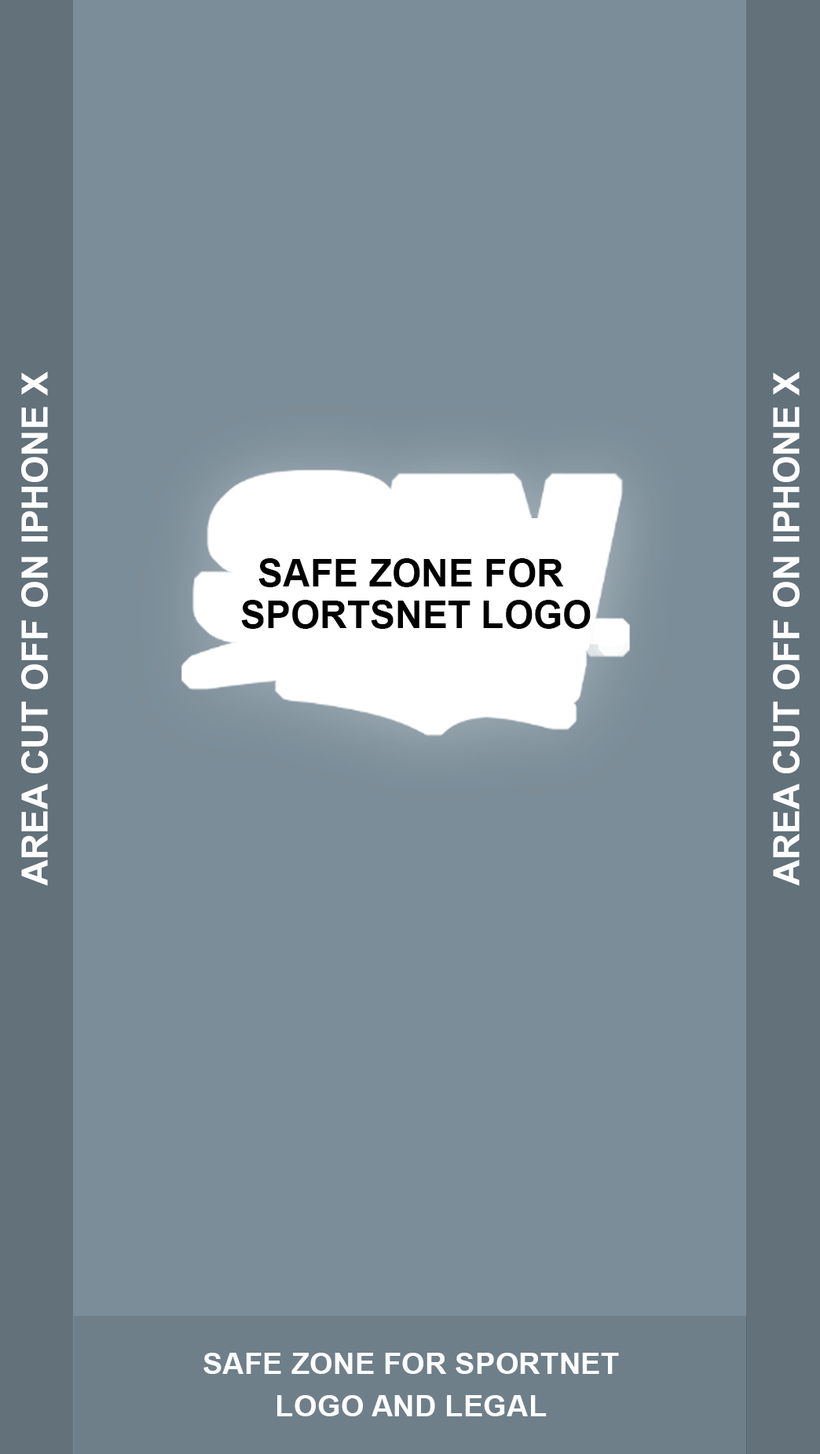
<style>
.page{position:relative;width:820px;height:1454px;background:#7b8d98}
.page>*{position:absolute;margin:0}
.t1{font:36.1px "Arial-BoldMT";color:#ffffff}
.t2{font:37.7px/42.1px "Arial-BoldMT";color:#000000}
.t3{font:30.1px/42.1px "Arial-BoldMT";color:#ffffff}
</style>
<div class="page">
<p class="t1" style="left:21px;top:371px;width:27px;height:515px;rotate:-90deg">AREA CUT OFF ON IPHONE X</p>
<p class="t1" style="left:773px;top:371px;width:26px;height:515px;rotate:-90deg">AREA CUT OFF ON IPHONE X</p>
<p class="t2" style="left:241px;top:558px;width:350px;height:71px;text-align:center">SAFE ZONE FOR<br> SPORTSNET LOGO</p>
<p class="t3" style="left:203px;top:1353px;width:416px;height:64px;text-align:center">SAFE ZONE FOR SPORTNET<br>LOGO AND LEGAL</p>
</div>
